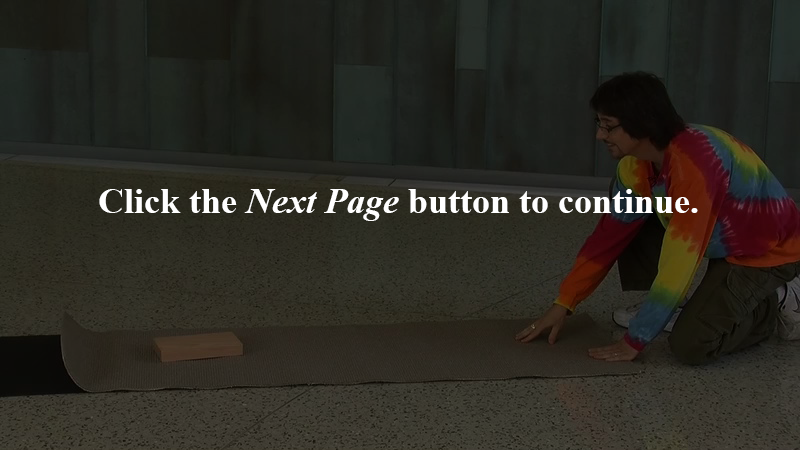
<style>
.page{position:relative;width:800px;height:450px}
.page>*{position:absolute;margin:0}
.t1{font:36px "TimesNewRomanPS-BoldMT";color:#ffffff}
.t2{font:36px "TimesNewRomanPS-BoldItalicMT";color:#ffffff}
</style>
<div class="page">
<p class="t1" style="left:99px;top:189px;width:599px;height:32px">Click the <span class="t2">Next Page</span> button to continue.</p>
</div>
